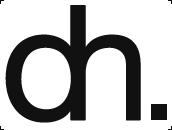
<style>
.page{position:relative;width:172px;height:130px;background:#ffffff}
.page>*{position:absolute;margin:0}
.t1{font:160px "HelveticaNeueLTStd-Roman";letter-spacing:-0.24em;color:#111111;font-weight:bold}
</style>
<div class="page">
<p class="t1" style="left:5px;top:5px;width:136px;height:118px">dh</p>
</div>
